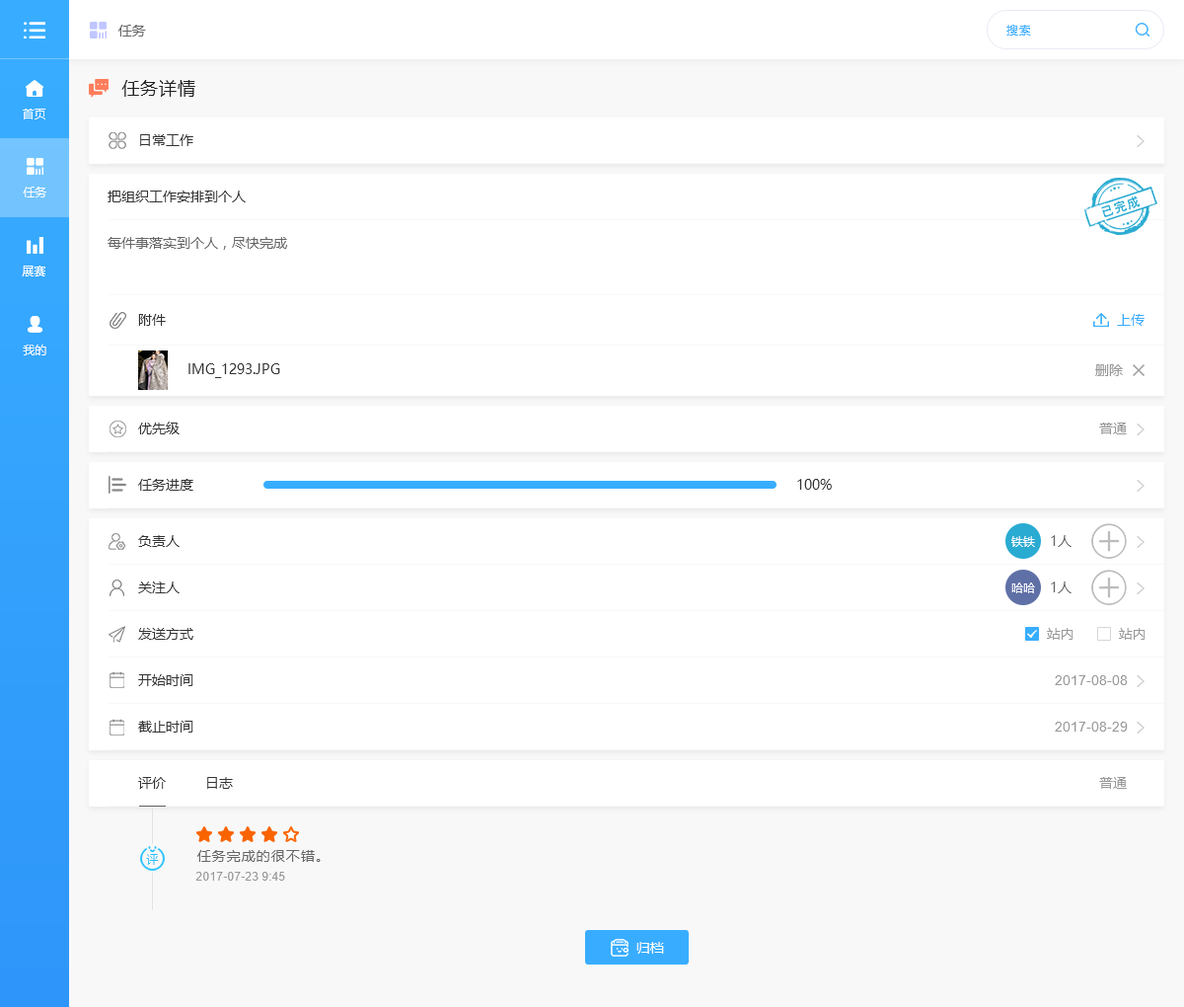
<style>
.page{position:relative;width:1184px;height:1007px;background:#ffffff}
.page>*{position:absolute;margin:0}
.t1{font:13.8px "MicrosoftYaHei";color:#666666}
.t2{font:11.8px "MicrosoftYaHei";letter-spacing:0.05em;color:#38adff}
.t3{font:17.8px "MicrosoftYaHei";letter-spacing:0.05em;color:#222222}
.t4{font:11.8px "MicrosoftYaHei";color:#ffffff}
.t5{font:13.8px "MicrosoftYaHei";color:#333333}
.t6{font:13.8px "MicrosoftYaHei";color:#38adff}
.t7{font:13.8px "MicrosoftYaHei";color:#999999}
.t8{font:13.8px "ArialMT";color:#999999}
.t9{font:11.8px "MicrosoftYaHei";letter-spacing:0.075em;color:#25c1ff}
.t10{font:13.8px "MicrosoftYaHei";letter-spacing:0.075em;color:#666666}
.t11{font:11.8px "ArialMT";color:#999999}
.t12{font:13.8px "MicrosoftYaHei";color:#ffffff}
</style>
<div class="page">
<p class="t1" style="left:118px;top:25px;width:28px;height:12px">任务</p>
<p class="t2" style="left:1007px;top:25px;width:24px;height:11px">搜索</p>
<p class="t3" style="left:121px;top:80px;width:74px;height:17px">任务详情</p>
<p class="t4" style="left:23px;top:109px;width:23px;height:10px">首页</p>
<p class="t5" style="left:140px;top:134px;width:53px;height:12px">日常工作</p>
<p class="t4" style="left:23px;top:187px;width:23px;height:10px">任务</p>
<p class="t5" style="left:108px;top:190px;width:138px;height:12px">把组织工作安排到个人</p>
<p class="t1" style="left:108px;top:237px;width:179px;height:13px">每件事落实到个人，尽快完成</p>
<p class="t4" style="left:22px;top:266px;width:23px;height:10px">展赛</p>
<p class="t5" style="left:138px;top:314px;width:28px;height:12px">附件</p>
<p class="t6" style="left:1117px;top:314px;width:28px;height:12px">上传</p>
<p class="t4" style="left:23px;top:344px;width:23px;height:11px">我的</p>
<p class="t5" style="left:189px;top:363px;width:91px;height:15px">IMG_1293.JPG</p>
<p class="t7" style="left:1096px;top:364px;width:27px;height:12px">删除</p>
<p class="t5" style="left:138px;top:421px;width:42px;height:13px">优先级</p>
<p class="t7" style="left:1100px;top:422px;width:27px;height:12px">普通</p>
<p class="t5" style="left:138px;top:479px;width:55px;height:12px">任务进度</p>
<p class="t5" style="left:798px;top:479px;width:34px;height:11px">100%</p>
<p class="t5" style="left:138px;top:535px;width:42px;height:12px">负责人</p>
<p class="t4" style="left:1012px;top:536px;width:23px;height:11px">铁铁</p>
<p class="t1" style="left:1051px;top:535px;width:21px;height:12px">1人</p>
<p class="t5" style="left:138px;top:581px;width:42px;height:12px">关注人</p>
<p class="t1" style="left:1051px;top:581px;width:21px;height:12px">1人</p>
<p class="t4" style="left:1012px;top:582px;width:23px;height:11px">哈哈</p>
<p class="t5" style="left:138px;top:628px;width:55px;height:12px">发送方式</p>
<p class="t7" style="left:1047px;top:628px;width:27px;height:12px">站内</p>
<p class="t7" style="left:1119px;top:628px;width:27px;height:12px">站内</p>
<p class="t5" style="left:138px;top:674px;width:55px;height:12px">开始时间</p>
<p class="t8" style="left:1055px;top:675px;width:73px;height:10px">2017-08-08</p>
<p class="t5" style="left:138px;top:721px;width:55px;height:11px">截止时间</p>
<p class="t8" style="left:1055px;top:722px;width:73px;height:9px">2017-08-29</p>
<p class="t5" style="left:138px;top:777px;width:28px;height:12px">评价</p>
<p class="t5" style="left:207px;top:777px;width:26px;height:12px">日志</p>
<p class="t7" style="left:1100px;top:777px;width:27px;height:12px">普通</p>
<p class="t9" style="left:146px;top:854px;width:13px;height:11px">评</p>
<p class="t10" style="left:197px;top:850px;width:124px;height:12px">任务完成的很不错。</p>
<p class="t11" style="left:195px;top:872px;width:90px;height:8px">2017-07-23 9:45</p>
<p class="t12" style="left:637px;top:942px;width:27px;height:11px">归档</p>
</div>
